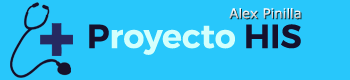
<style>
.page{position:relative;width:350px;height:80px;background:#28c7fb}
.page>*{position:absolute;margin:0}
.t1{font:13.3px "Verdana"}
.t2{font:33.3px "Montserrat-SemiBold";color:#d4fffc}
.t3{font:33.3px "Montserrat-SemiBold";color:#16112c}
</style>
<div class="page">
<p class="t1" style="left:229px;top:8px;width:72px;height:11px">Alex Pinilla</p>
<p class="t2" style="left:89px;top:24px;width:212px;height:31px"><span class="t3">P</span>royecto <span class="t3">HIS</span></p>
</div>
